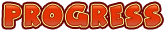
<style>
.page{position:relative;width:165px;height:31px}
.page>*{position:absolute;margin:0}
.t1{font:30px "OtakuRant-Bold";letter-spacing:0.075em}
</style>
<div class="page">
<p class="t1" style="left:5px;top:5px;width:156px;height:21px">progress</p>
</div>
